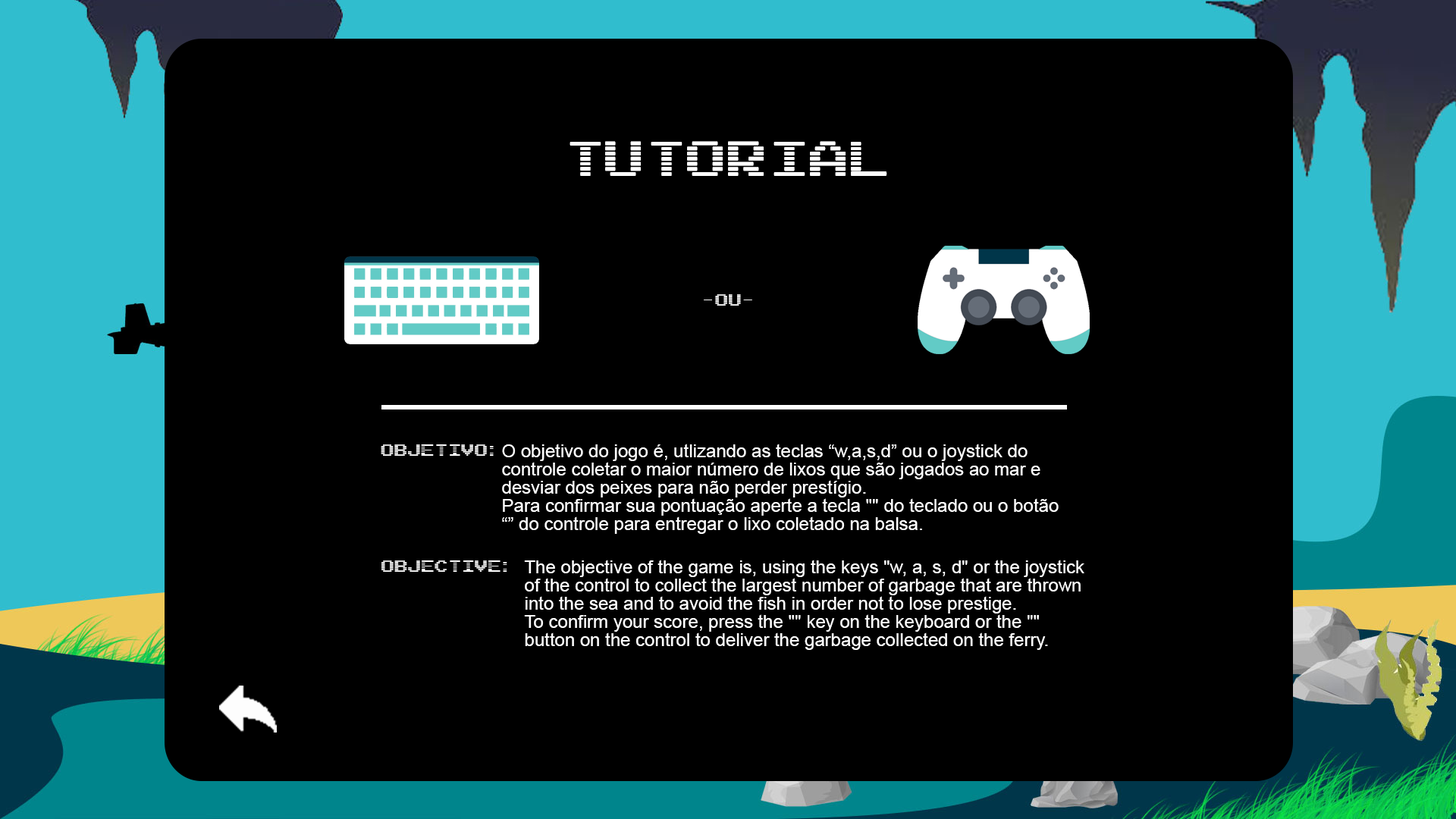
<style>
.page{position:relative;width:1456px;height:819px;background:#000000}
.page>*{position:absolute;margin:0}
.t1{font:41.7px "ArcadeInterlaced";color:#ffffff}
.t2{font:13.6px "ArcadeInterlaced";color:#ffffff}
.t3{font:18.2px/18.2px "ArialMT";color:#ffffff}
</style>
<div class="page">
<p class="t1" style="left:570px;top:141px;width:317px;height:35px">tutorial</p>
<p class="t2" style="left:704px;top:294px;width:48px;height:12px">-ou-</p>
<p class="t2" style="left:381px;top:444px;width:113px;height:12px">OBJETIVO:</p>
<p class="t3" style="left:502px;top:444px;width:557px;height:90px">O objetivo do jogo é, utlizando as teclas “w,a,s,d” ou o joystick do controle coletar o maior número de lixos que são jogados ao mar e desviar dos peixes para não perder prestígio. <br>Para confirmar sua pontuação aperte a tecla "" do teclado ou o botão “” do controle para entregar o lixo coletado na balsa.</p>
<p class="t2" style="left:381px;top:560px;width:126px;height:12px">OBJEctive:</p>
<p class="t3" style="left:524px;top:560px;width:560px;height:90px">The objective of the game is, using the keys "w, a, s, d" or the joystick of the control to collect the largest number of garbage that are thrown into the sea and to avoid the fish in order not to lose prestige.<br>To confirm your score, press the "" key on the keyboard or the "" button on the control to deliver the garbage collected on the ferry.</p>
</div>
